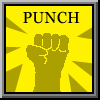
<style>
.page{position:relative;width:100px;height:100px;background:#fff200}
.page>*{position:absolute;margin:0}
.t1{font:16px "Georgia";color:#000000}
</style>
<div class="page">
<p class="t1" style="left:23px;top:11px;width:57px;height:13px">PUNCH</p>
</div>
